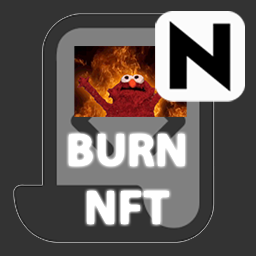
<style>
.page{position:relative;width:256px;height:256px;background:#333333}
.page>*{position:absolute;margin:0}
.t1{font:47px "MyriadPro-Bold";color:#ffffff}
.t2{font:48px "MyriadPro-Bold";color:#ffffff}
</style>
<div class="page">
<p class="t1" style="left:69px;top:134px;width:116px;height:90px;text-align:center">BURN<br><span class="t2">NFT</span></p>
</div>
